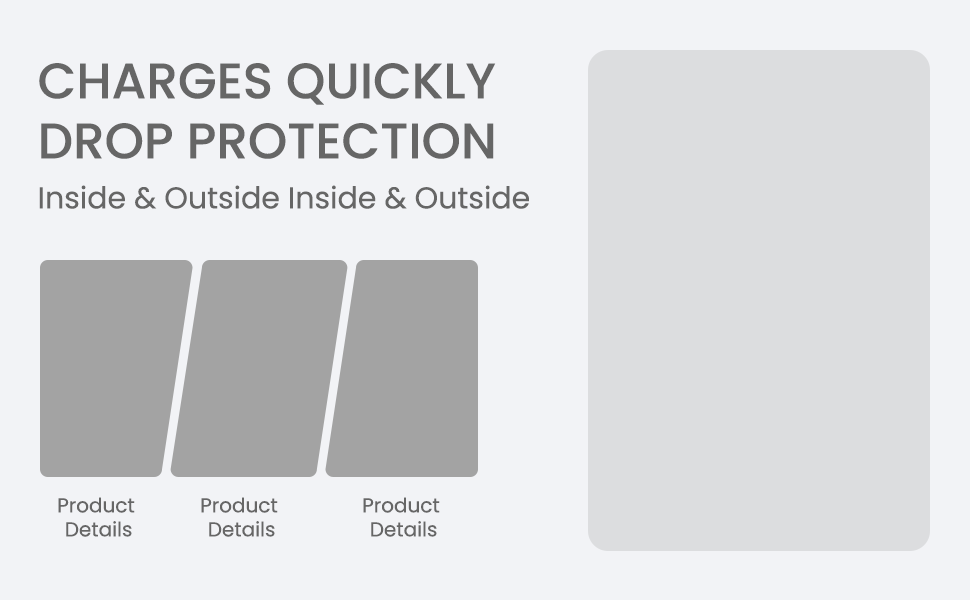
<style>
.page{position:relative;width:970px;height:600px;background:#f2f3f6}
.page>*{position:absolute;margin:0}
.t1{font:50px "Poppins-Medium";color:#666666;text-transform:uppercase}
.t2{font:30px "Poppins-Regular";color:#666666}
.t3{font:20px "Poppins-Regular";color:#666666}
</style>
<div class="page">
<p class="t1" style="left:39px;top:63px;width:457px;height:96px">Charges Quickly<br>Drop Protection</p>
<p class="t2" style="left:39px;top:185px;width:490px;height:24px">Inside &amp; Outside Inside &amp; Outside</p>
<p class="t3" style="left:58px;top:497px;width:77px;height:40px;text-align:center">Product <br>Details</p>
<p class="t3" style="left:201px;top:497px;width:77px;height:40px;text-align:center">Product <br>Details</p>
<p class="t3" style="left:363px;top:497px;width:77px;height:40px;text-align:center">Product <br>Details</p>
</div>
